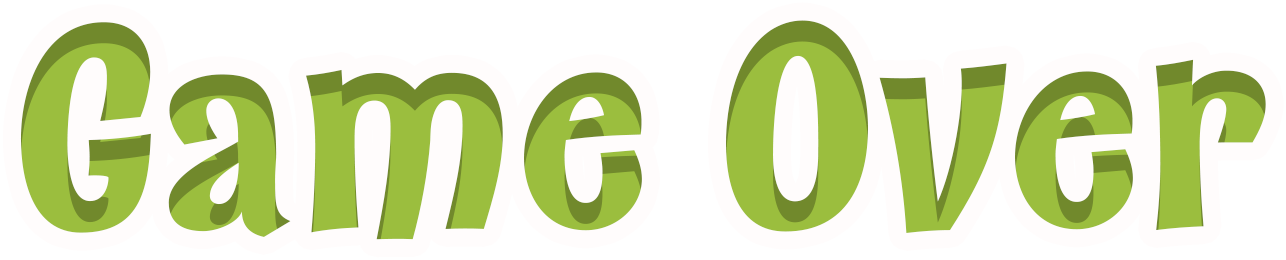
<style>
.page{position:relative;width:1286px;height:260px;background:#ffffff}
.page>*{position:absolute;margin:0}
.t1{font:281.2px "Catseye-Bold";color:#9bbe3e}
</style>
<div class="page">
<p class="t1" style="left:20px;top:20px;width:1246px;height:220px">Game Over</p>
</div>
